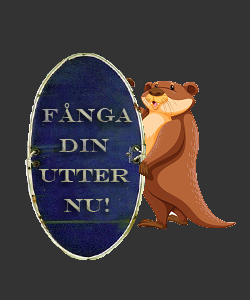
<style>
.page{position:relative;width:250px;height:300px;background:#333333}
.page>*{position:absolute;margin:0}
.t1{font:20px/30px "EngraversMT"}
</style>
<div class="page">
<p class="t1" style="left:39px;top:103px;width:94px;height:109px;text-align:center">Fånga<br>Din <br>utter <br>nu!</p>
</div>
